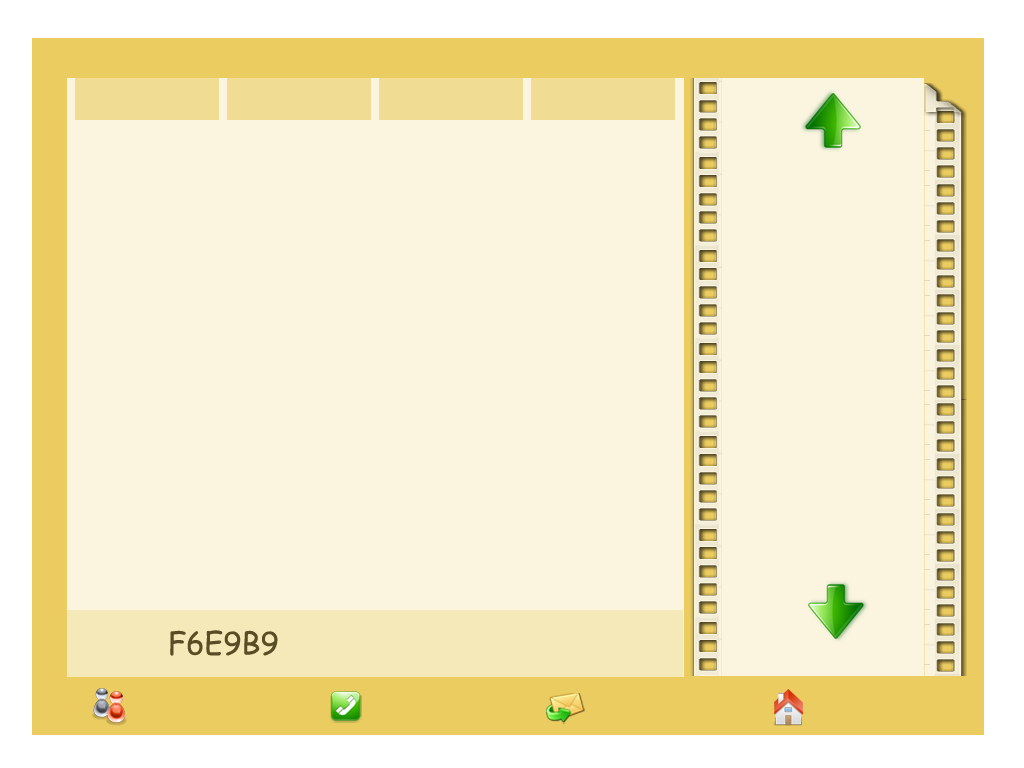
<style>
.page{position:relative;width:1024px;height:768px;background:#fbf5df}
.page>*{position:absolute;margin:0}
.t1{font:30px "ComicSansMS";color:#584d24}
</style>
<div class="page">
<p class="t1" style="left:170px;top:630px;width:108px;height:26px">F6E9B9</p>
</div>
